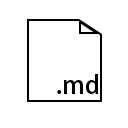
<style>
.page{position:relative;width:128px;height:128px;background:#ffffff}
.page>*{position:absolute;margin:0}
.t1{font:25px "AdobeHeitiStd-Regular";color:#000000}
</style>
<div class="page">
<p class="t1" style="left:57px;top:74px;width:41px;height:20px">.md</p>
</div>
